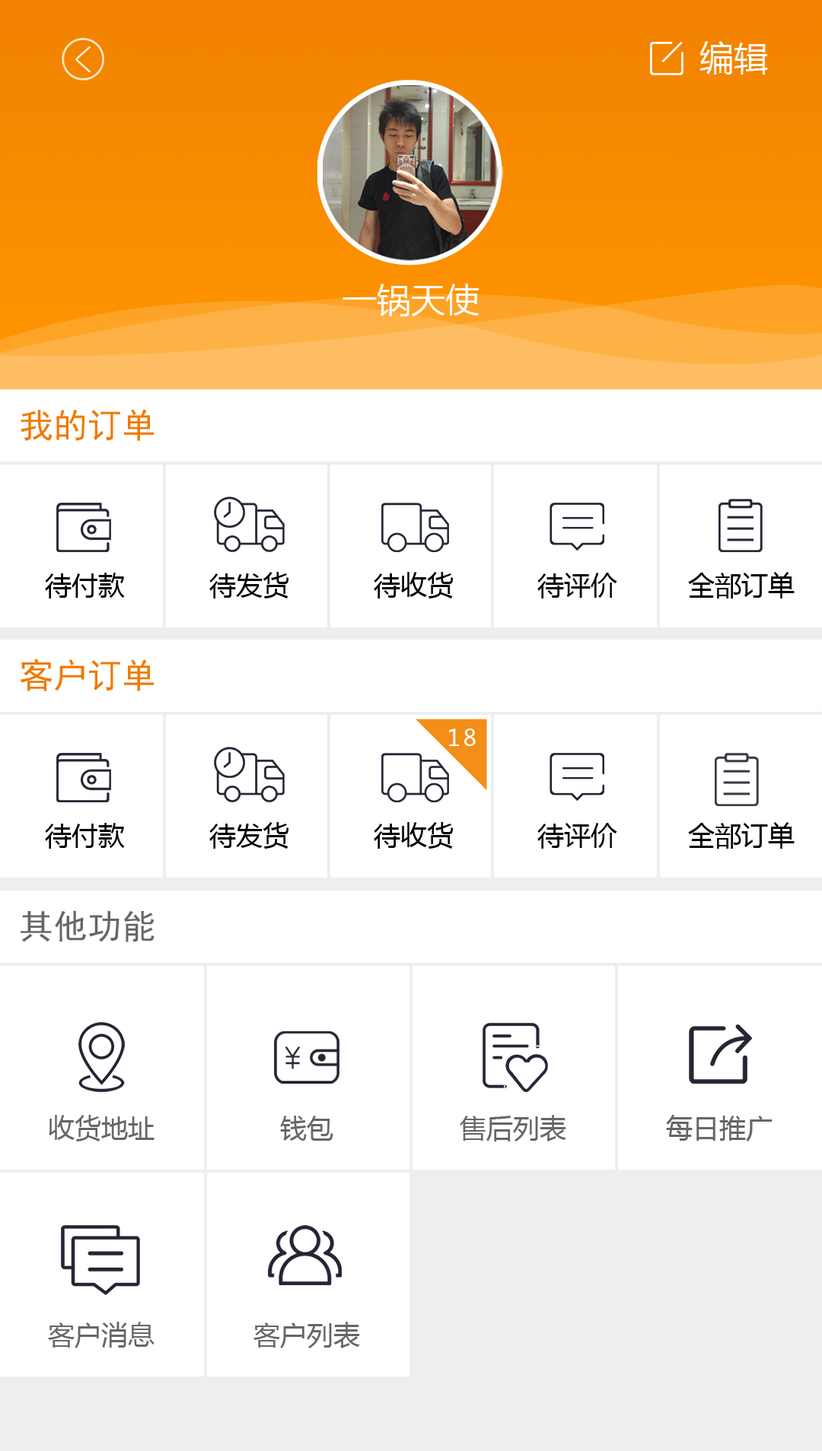
<style>
.page{position:relative;width:822px;height:1451px;background:#ffffff}
.page>*{position:absolute;margin:0}
.t1{font:34.2px "MicrosoftYaHei";color:#ffffff}
.t2{font:34.2px "SimHei";color:#ef7a00}
.t3{font:26.6px "MicrosoftYaHei";color:#000000}
.t4{font:22.8px "MicrosoftYaHei";letter-spacing:0.108em;color:#ffffff}
.t5{font:34.2px "SimHei";color:#666666}
.t6{font:26.6px "MicrosoftYaHei";color:#666666}
</style>
<div class="page">
<p class="t1" style="left:699px;top:41px;width:69px;height:34px">编辑</p>
<p class="t1" style="left:342px;top:284px;width:137px;height:32px">一锅天使</p>
<p class="t2" style="left:21px;top:409px;width:133px;height:32px">我的订单</p>
<p class="t3" style="left:45px;top:573px;width:80px;height:26px">待付款</p>
<p class="t3" style="left:209px;top:572px;width:80px;height:27px">待发货</p>
<p class="t3" style="left:374px;top:572px;width:79px;height:27px">待收货</p>
<p class="t3" style="left:537px;top:573px;width:80px;height:26px">待评价</p>
<p class="t3" style="left:688px;top:572px;width:106px;height:27px">全部订单</p>
<p class="t2" style="left:20px;top:659px;width:134px;height:32px">客户订单</p>
<p class="t4" style="left:449px;top:729px;width:26px;height:17px">18</p>
<p class="t3" style="left:45px;top:823px;width:80px;height:26px">待付款</p>
<p class="t3" style="left:209px;top:822px;width:80px;height:27px">待发货</p>
<p class="t3" style="left:374px;top:822px;width:79px;height:27px">待收货</p>
<p class="t3" style="left:537px;top:823px;width:80px;height:26px">待评价</p>
<p class="t3" style="left:688px;top:822px;width:106px;height:27px">全部订单</p>
<p class="t5" style="left:21px;top:911px;width:133px;height:32px">其他功能</p>
<p class="t6" style="left:49px;top:1115px;width:105px;height:27px">收货地址</p>
<p class="t6" style="left:280px;top:1116px;width:53px;height:25px">钱包</p>
<p class="t6" style="left:459px;top:1115px;width:107px;height:27px">售后列表</p>
<p class="t6" style="left:666px;top:1115px;width:106px;height:27px">每日推广</p>
<p class="t6" style="left:48px;top:1322px;width:106px;height:27px">客户消息</p>
<p class="t6" style="left:253px;top:1322px;width:107px;height:27px">客户列表</p>
</div>
